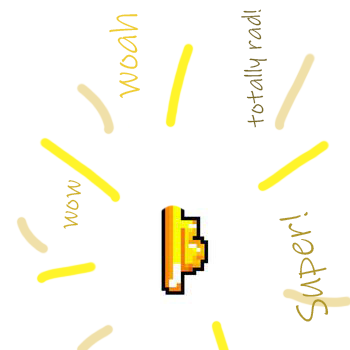
<style>
.page{position:relative;width:350px;height:350px;background:#ffffff}
.page>*{position:absolute;margin:0}
.t1{font:38.8px "InkFree";color:#efce34}
.t2{font:25.1px "InkFree";color:#7a6b24}
.t3{font:26.5px "InkFree";color:#d0b225}
.t4{font:42px "InkFree";color:#b0982a}
</style>
<div class="page">
<p class="t1" style="left:109px;top:14px;width:31px;height:84px;rotate:-92deg">woah</p>
<p class="t2" style="left:241px;top:9px;width:26px;height:119px;rotate:-92deg">totally rad!</p>
<p class="t3" style="left:63px;top:180px;width:18px;height:49px;rotate:-84deg">wow</p>
<p class="t4" style="left:279px;top:211px;width:50px;height:111px;rotate:-102deg">Super!</p>
</div>
